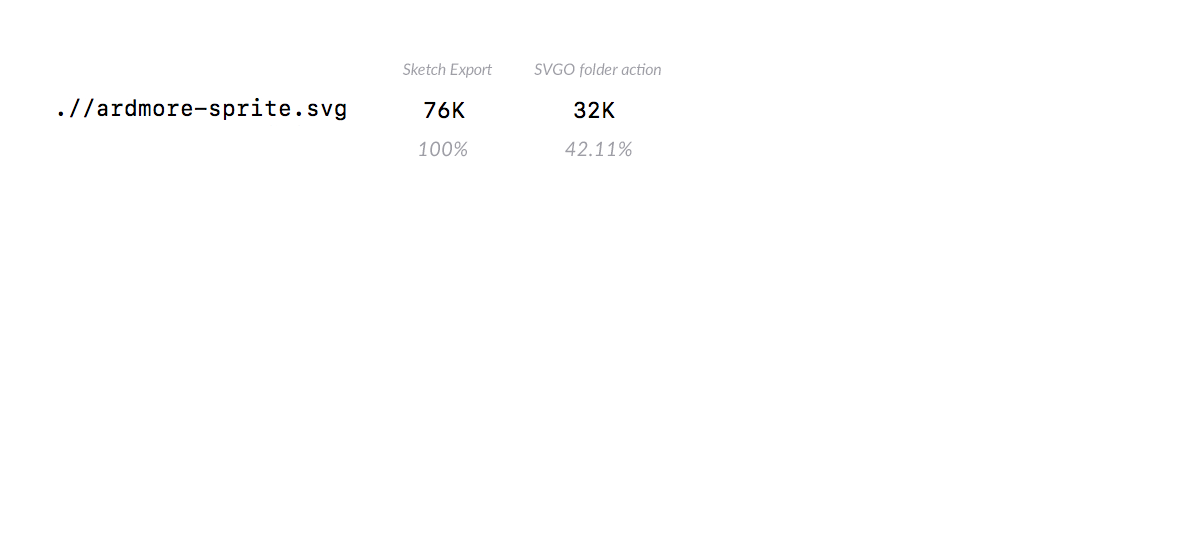
<style>
.page{position:relative;width:1198px;height:551px;background:#ffffff}
.page>*{position:absolute;margin:0}
.t1{font:16px "Lato-Italic";color:#9e9ea6}
.t2{font:20px "Lato-Italic";color:#9e9ea6}
</style>
<div class="page">
<p class="t1" style="left:402px;top:63px;width:91px;height:15px">Sketch Export</p>
<p class="t1" style="left:534px;top:63px;width:127px;height:15px">SVGO folder action</p>
<p class="t2" style="left:419px;top:141px;width:49px;height:16px">100%</p>
<p class="t2" style="left:565px;top:141px;width:67px;height:16px">42.11%</p>
</div>
